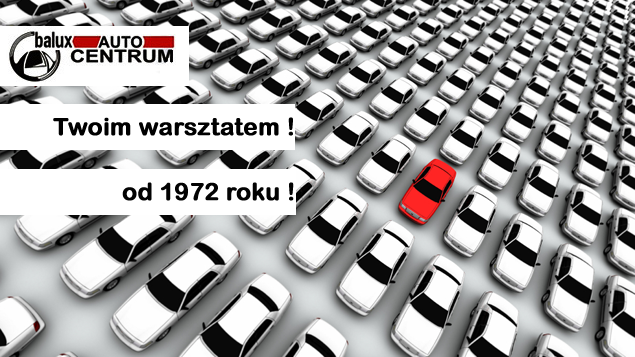
<style>
.page{position:relative;width:635px;height:357px}
.page>*{position:absolute;margin:0}
.t1{font:24px "ArialRoundedMTBold";color:#000000;font-weight:bold}
.t2{font:24px "ArialRoundedMTBold";color:#020202;font-weight:bold}
</style>
<div class="page">
<p class="t1" style="left:53px;top:117px;width:240px;height:19px">Twoim warsztatem !</p>
<p class="t2" style="left:122px;top:182px;width:172px;height:19px">od 1972 roku !</p>
</div>
